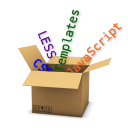
<style>
.page{position:relative;width:128px;height:128px;background:#ffffff}
.page>*{position:absolute;margin:0}
.t1{font:12px "Menlo-Regular";color:#005e04}
.t2{font:12px "Menlo-Regular";color:#590091}
.t3{font:12px "Menlo-Regular";color:#f26522}
.t4{font:12px "Menlo-Regular";color:#0000ff}
</style>
<div class="page">
<p class="t1" style="left:54px;top:9px;width:25px;height:62px;rotate:-75deg">Templates</p>
<p class="t2" style="left:38px;top:30px;width:19px;height:29px;rotate:67deg">LESS</p>
<p class="t3" style="left:67px;top:23px;width:55px;height:55px;rotate:-45deg">JavaScript</p>
<p class="t4" style="left:33px;top:59px;width:20px;height:18px;rotate:41deg">CSS</p>
</div>
